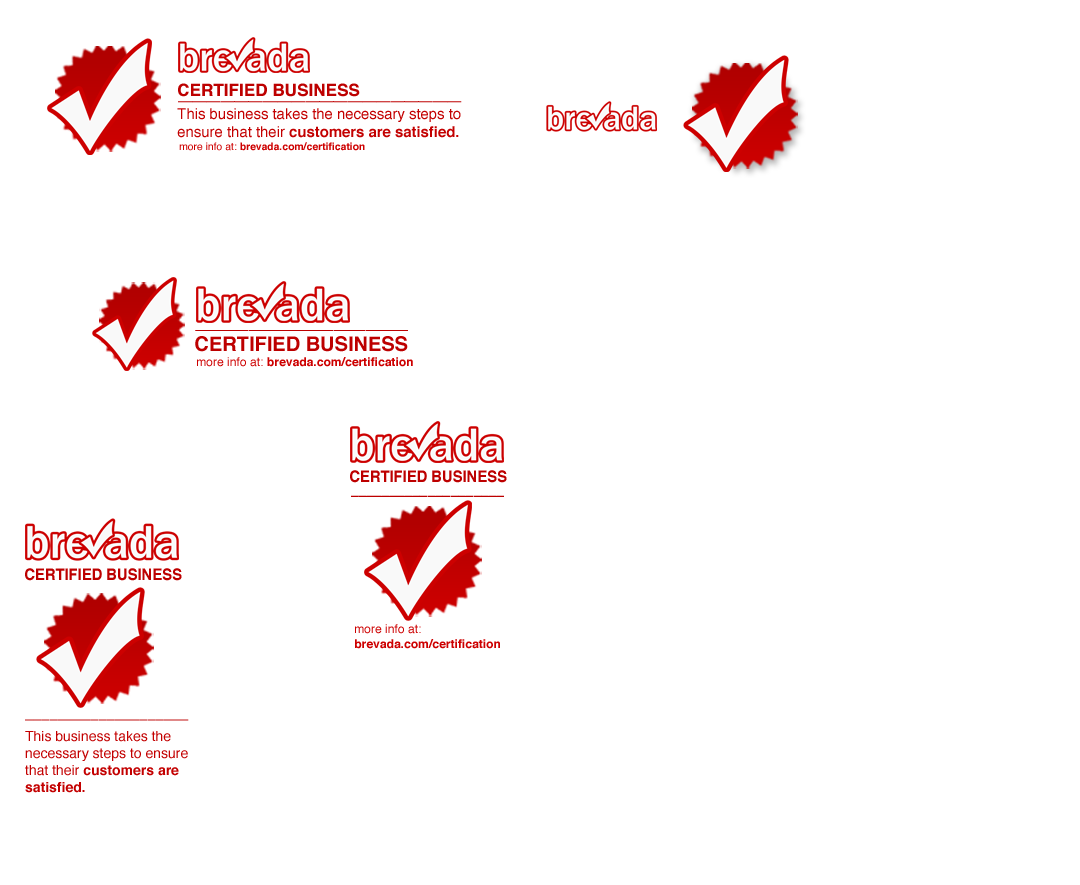
<style>
.page{position:relative;width:1080px;height:885px;background:#ffffff}
.page>*{position:absolute;margin:0}
.t1{font:17.1px "Helvetica-Bold";color:#bd0000}
.t2{font:18.6px "Helvetica";color:#bd0000;scale:1.37 1}
.t3{font:14.9px "Helvetica";color:#c30000}
.t4{font:14.9px "Helvetica-Bold";color:#c30000}
.t5{font:10.4px "Helvetica-Bold";color:#cd0000}
.t6{font:10.4px "Helvetica";color:#cd0000}
.t7{font:23.2px "Helvetica";color:#bd0000;scale:0.82 1}
.t8{font:20px "Helvetica-Bold";color:#bd0000}
.t9{font:12.1px "Helvetica-Bold";color:#cd0000}
.t10{font:12.1px "Helvetica";color:#cd0000}
.t11{font:15.8px "Helvetica-Bold";color:#bd0000;scale:0.93 1}
.t12{font:24.9px "Helvetica";color:#bd0000;scale:0.55 1}
.t13{font:20.7px "Helvetica";scale:0.71 1}
.t14{font:14px "Helvetica";color:#c30000}
.t15{font:14px "Helvetica-Bold";color:#c30000}
</style>
<div class="page">
<p class="t1" style="left:178px;top:83px;width:182px;height:14px">CERTIFIED BUSINESS</p>
<p class="t2" style="left:178px;top:101px;width:284px;height:2px">____________________</p>
<p class="t3" style="left:177px;top:108px;width:284px;height:30px">This business takes the necessary steps to ensure that their <span class="t4">customers are satisfied.</span></p>
<p class="t5" style="left:179px;top:142px;width:186px;height:9px"><span class="t6">more info at: </span>brevada.com/certification</p>
<p class="t7" style="left:195px;top:330px;width:213px;height:1px">____________________</p>
<p class="t8" style="left:195px;top:336px;width:213px;height:16px">CERTIFIED BUSINESS</p>
<p class="t9" style="left:197px;top:357px;width:216px;height:10px"><span class="t10">more info at: </span>brevada.com/certification</p>
<p class="t11" style="left:350px;top:470px;width:157px;height:13px">CERTIFIED BUSINESS</p>
<p class="t12" style="left:351px;top:495px;width:153px;height:2px">____________________</p>
<p class="t11" style="left:25px;top:568px;width:157px;height:13px">CERTIFIED BUSINESS</p>
<p class="t9" style="left:355px;top:624px;width:145px;height:25px"><span class="t10">more info at: <br></span>brevada.com/certification</p>
<p class="t13" style="left:25px;top:719px;width:164px;height:2px">____________________</p>
<p class="t14" style="left:25px;top:731px;width:163px;height:62px">This business takes the necessary steps to ensure that their <span class="t15">customers are satisfied.</span></p>
</div>
